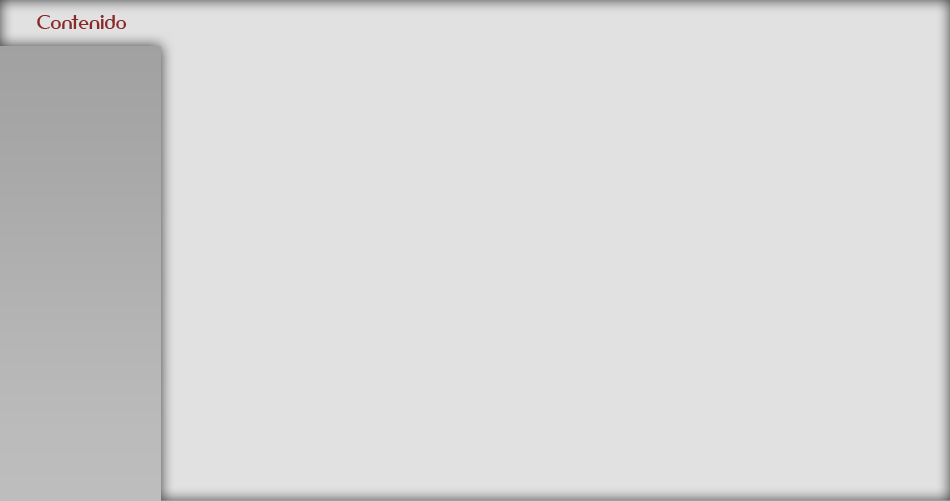
<style>
.page{position:relative;width:950px;height:501px;background:#e1e1e1}
.page>*{position:absolute;margin:0}
.t1{font:18.8px "AmerikaSans";color:#8a2a2a}
</style>
<div class="page">
<p class="t1" style="left:37px;top:15px;width:90px;height:14px">Contenido</p>
</div>
